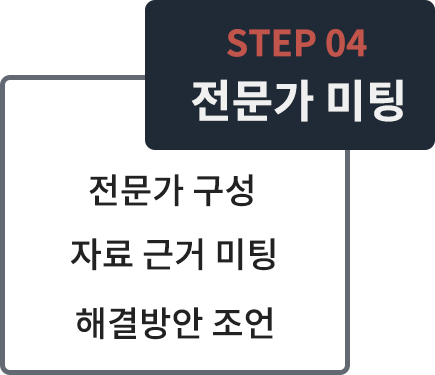
<style>
.page{position:relative;width:435px;height:375px;background:#ffffff}
.page>*{position:absolute;margin:0}
.t1{font:36px "NotoSansCJKkr-Bold";color:#c1554b}
.t2{font:45px "NotoSansCJKkr-Bold";color:#f0f0f0}
.t3{font:35px "NotoSansCJKkr-Medium";color:#222222}
</style>
<div class="page">
<p class="t1" style="left:227px;top:29px;width:140px;height:28px">STEP 04</p>
<p class="t2" style="left:191px;top:79px;width:212px;height:43px">전문가 미팅</p>
<p class="t3" style="left:89px;top:174px;width:164px;height:33px">전문가 구성</p>
<p class="t3" style="left:70px;top:238px;width:205px;height:33px">자료 근거 미팅</p>
<p class="t3" style="left:76px;top:307px;width:197px;height:33px">해결방안 조언</p>
</div>
